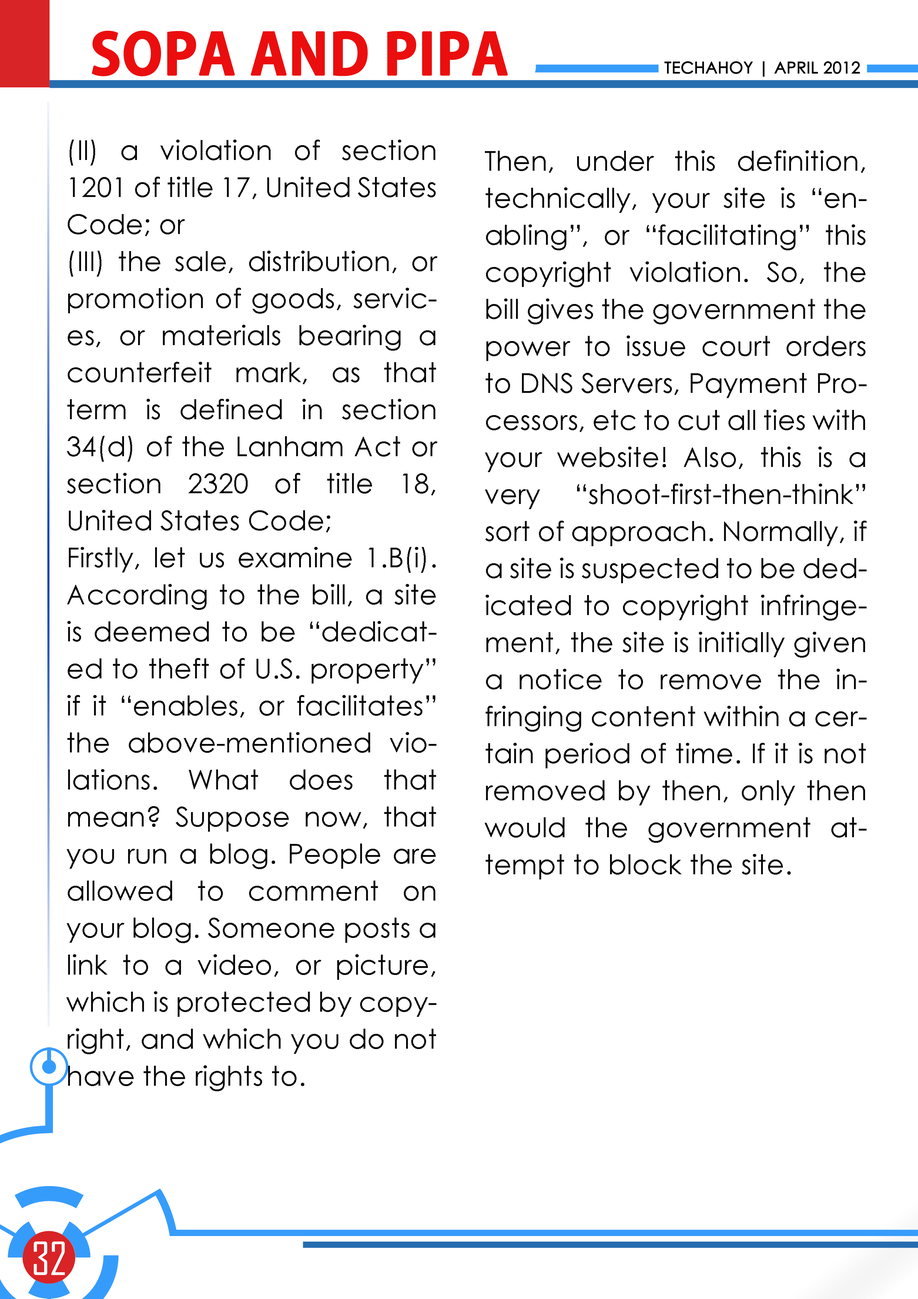
<style>
.page{position:relative;width:918px;height:1299px;background:#ffffff}
.page>*{position:absolute;margin:0}
.t1{font:55.5px "AdobeGothicStd-Bold";color:#eb0e0e;text-transform:uppercase;font-weight:bold}
.t2{font:16px "CenturyGothic";color:#000000;text-transform:uppercase;font-weight:bold}
.t3{font:27.5px/37px "CenturyGothic";color:#080808}
.t4{font:43.7px "AgencyFB-Reg";color:#ffffff;text-transform:uppercase}
</style>
<div class="page">
<p class="t1" style="left:92px;top:30px;width:416px;height:46px">sopa and pipa</p>
<p class="t2" style="left:665px;top:61px;width:195px;height:16px">techahoy | APRIL 2012</p>
<p class="t3" style="left:66px;top:140px;width:372px;height:951px;text-align:justify">(II) a violation of section 1201 of title 17, United States Code; or<br>(III) the sale, distribution, or promotion of goods, services, or materials bearing a counterfeit mark, as that term is defined in section 34(d) of the Lanham Act or section 2320 of title 18, United States Code; <br>Firstly, let us examine 1.B(i). According to the bill, a site is deemed to be “dedicated to theft of U.S. property” if it “enables, or facilitates” the above-mentioned violations. What does that mean? Suppose now, that you run a blog. People are allowed to comment on your blog. Someone posts a link to a video, or picture, which is protected by copyright, and which you do not have the rights to.</p>
<p class="t3" style="left:485px;top:150px;width:382px;height:729px;text-align:justify">Then, under this definition, technically, your site is “enabling”, or “facilitating” this copyright violation. So, the bill gives the government the power to issue court orders to DNS Servers, Payment Processors, etc to cut all ties with your website! Also, this is a very “shoot-first-then-think” sort of approach. Normally, if a site is suspected to be dedicated to copyright infringement, the site is initially given a notice to remove the infringing content within a certain period of time. If it is not removed by then, only then would the government attempt to block the site.</p>
<p class="t4" style="left:34px;top:1241px;width:31px;height:34px">32</p>
</div>
